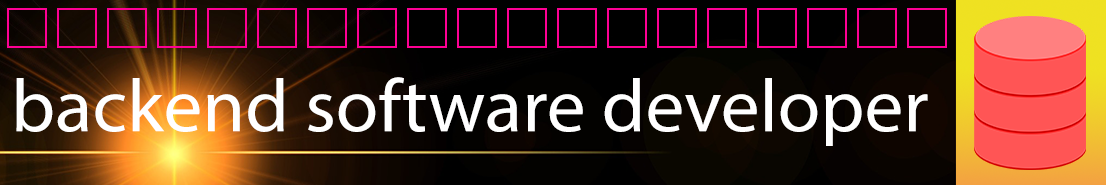
<style>
.page{position:relative;width:1106px;height:185px}
.page>*{position:absolute;margin:0}
.t1{font:75px "MyriadPro-Regular";color:#ffffff;scale:1.03 1}
</style>
<div class="page">
<p class="t1" style="left:16px;top:77px;width:912px;height:69px">backend software developer</p>
</div>
